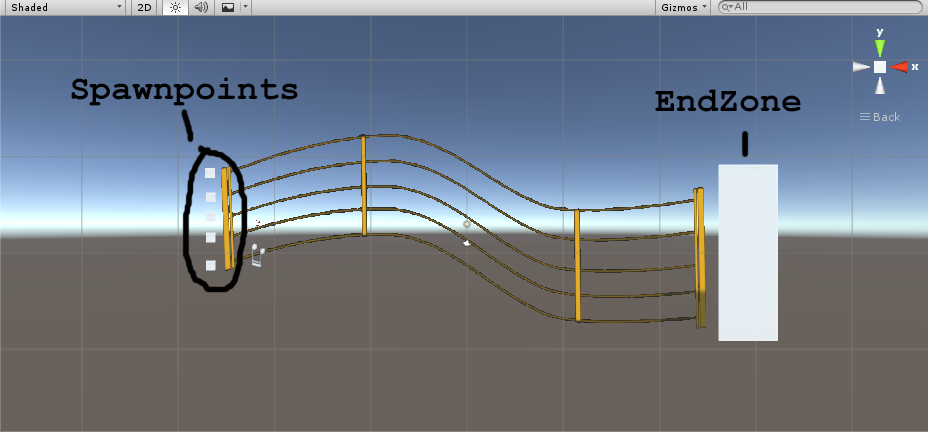
<style>
.page{position:relative;width:928px;height:432px}
.page>*{position:absolute;margin:0}
.t1{font:35px "CourierNewPS-BoldMT";color:#020202}
</style>
<div class="page">
<p class="t1" style="left:71px;top:77px;width:227px;height:29px">Spawnpoints</p>
<p class="t1" style="left:655px;top:89px;width:146px;height:23px">EndZone</p>
</div>
